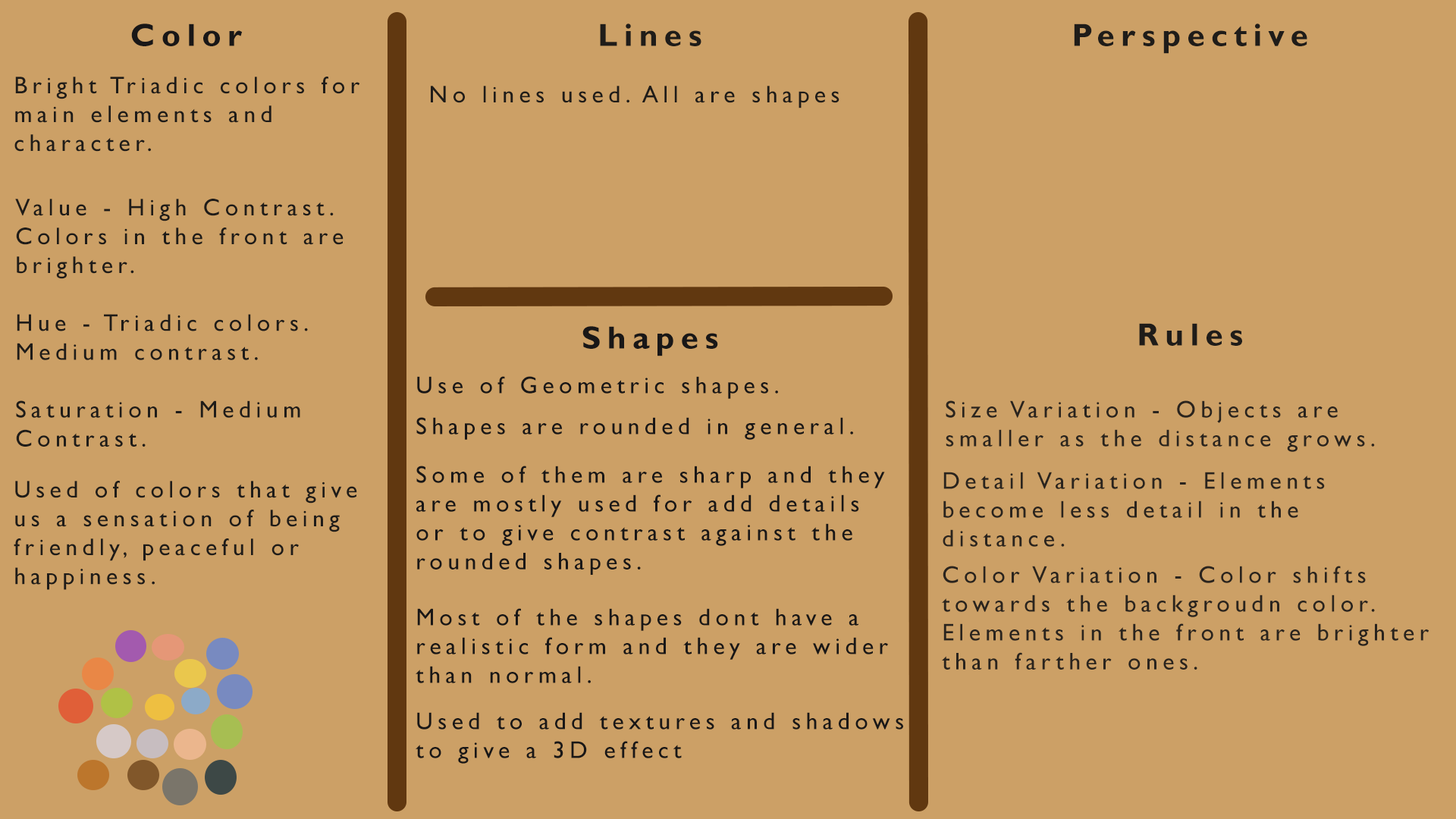
<style>
.page{position:relative;width:1456px;height:819px;background:#cca066}
.page>*{position:absolute;margin:0}
.t1{font:32.1px "GillSansMT-Bold";letter-spacing:0.2em;color:#191717}
.t2{font:32.1px "GillSansMT-Bold";letter-spacing:0.2em;color:#1f1c19}
.t3{font:24.1px "GillSansMT";letter-spacing:0.2em;color:#1f1c19}
.t4{font:24.1px "GillSansMT";letter-spacing:0.2em;color:#191717}
.t5{font:24.1px "GillSansMT";letter-spacing:0.2em;color:#2a241e}
</style>
<div class="page">
<p class="t1" style="left:131px;top:24px;width:111px;height:22px">Color</p>
<p class="t2" style="left:600px;top:24px;width:101px;height:22px">Lines</p>
<p class="t2" style="left:1074px;top:24px;width:233px;height:30px">Perspective</p>
<p class="t3" style="left:14px;top:77px;width:346px;height:75px">Bright Triadic colors for main elements and character.</p>
<p class="t3" style="left:431px;top:86px;width:408px;height:22px">No lines used. All are shapes</p>
<p class="t3" style="left:15px;top:199px;width:329px;height:248px">Value - High Contrast. Colors in the front are brighter.<br><br>Hue - Triadic colors. Medium contrast.<br><br>Saturation - Medium Contrast.</p>
<p class="t1" style="left:582px;top:326px;width:136px;height:30px">Shapes</p>
<p class="t2" style="left:1139px;top:323px;width:103px;height:23px">Rules</p>
<p class="t4" style="left:417px;top:376px;width:361px;height:23px">Use of Geometric shapes.</p>
<p class="t5" style="left:946px;top:400px;width:429px;height:52px">Size Variation - Objects are smaller as the distance grows.</p>
<p class="t4" style="left:416px;top:417px;width:437px;height:23px">Shapes are rounded in general.</p>
<p class="t4" style="left:416px;top:466px;width:469px;height:109px">Some of them are sharp and they are mostly used for add details or to give contrast against the rounded shapes.</p>
<p class="t5" style="left:943px;top:472px;width:382px;height:75px">Detail Variation - Elements become less detail in the distance.</p>
<p class="t3" style="left:14px;top:481px;width:343px;height:109px">Used of colors that give us a sensation of being friendly, peaceful or happiness.</p>
<p class="t5" style="left:942px;top:566px;width:487px;height:104px">Color Variation - Color shifts towards the backgroudn color. <br>Elements in the front are brighter than farther ones.</p>
<p class="t4" style="left:416px;top:608px;width:472px;height:75px">Most of the shapes dont have a realistic form and they are wider than normal.</p>
<p class="t4" style="left:416px;top:712px;width:487px;height:52px">Used to add textures and shadows to give a 3D effect</p>
</div>
